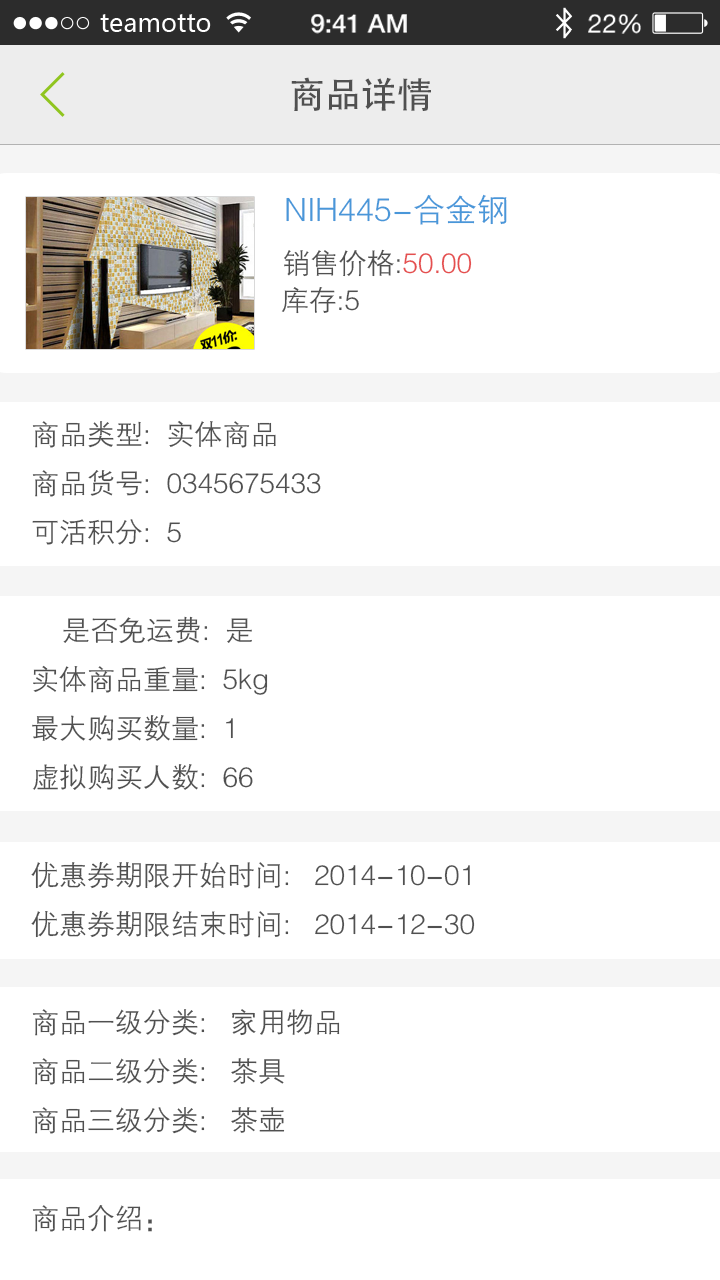
<style>
.page{position:relative;width:720px;height:1280px;background:#ffffff}
.page>*{position:absolute;margin:0}
.t1{font:36px "AdobeHeitiStd-Regular";color:#505050}
.t2{font:32px "FZZDXJW--GB1-0";color:#4997d9}
.t3{font:28px "FZZDXJW--GB1-0";color:#505050}
.t4{font:28px "FZZDXJW--GB1-0";color:#e54f4f}
</style>
<div class="page">
<p class="t1" style="left:291px;top:77px;width:140px;height:34px">商品详情</p>
<p class="t2" style="left:286px;top:194px;width:221px;height:31px">NIH445-合金钢</p>
<p class="t3" style="left:284px;top:249px;width:188px;height:28px">销售价格:<span class="t4">50.00</span></p>
<p class="t3" style="left:281px;top:287px;width:78px;height:27px">库存:5</p>
<p class="t3" style="left:31px;top:420px;width:444px;height:812px">商品类型:  实体商品<br>商品货号:  0345675433<br>可活积分:  5<br><br>    是否免运费:  是<br>实体商品重量:  5kg<br>最大购买数量:  1<br>虚拟购买人数:  66<br><br>优惠券期限开始时间:   2014-10-01<br>优惠券期限结束时间:   2014-12-30<br><br>商品一级分类:   家用物品<br>商品二级分类:   茶具<br>商品三级分类:   茶壶<br><br>商品介绍：</p>
</div>
